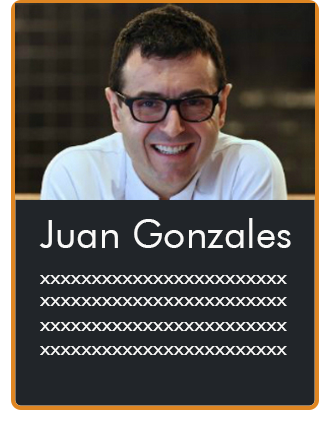
<style>
.page{position:relative;width:330px;height:426px;background:#212529}
.page>*{position:absolute;margin:0}
.t1{font:39.3px "FuturaBT-Book";color:#f9f9f8}
.t2{font:20.1px "FuturaBT-Book";color:#f9f9f8;scale:1.18 1}
</style>
<div class="page">
<p class="t1" style="left:39px;top:218px;width:252px;height:30px">Juan Gonzales</p>
<p class="t2" style="left:40px;top:275px;width:247px;height:9px">xxxxxxxxxxxxxxxxxxxxxxxx</p>
<p class="t2" style="left:40px;top:297px;width:247px;height:9px">xxxxxxxxxxxxxxxxxxxxxxxx</p>
<p class="t2" style="left:40px;top:322px;width:247px;height:9px">xxxxxxxxxxxxxxxxxxxxxxxx</p>
<p class="t2" style="left:40px;top:346px;width:247px;height:9px">xxxxxxxxxxxxxxxxxxxxxxxx</p>
</div>
